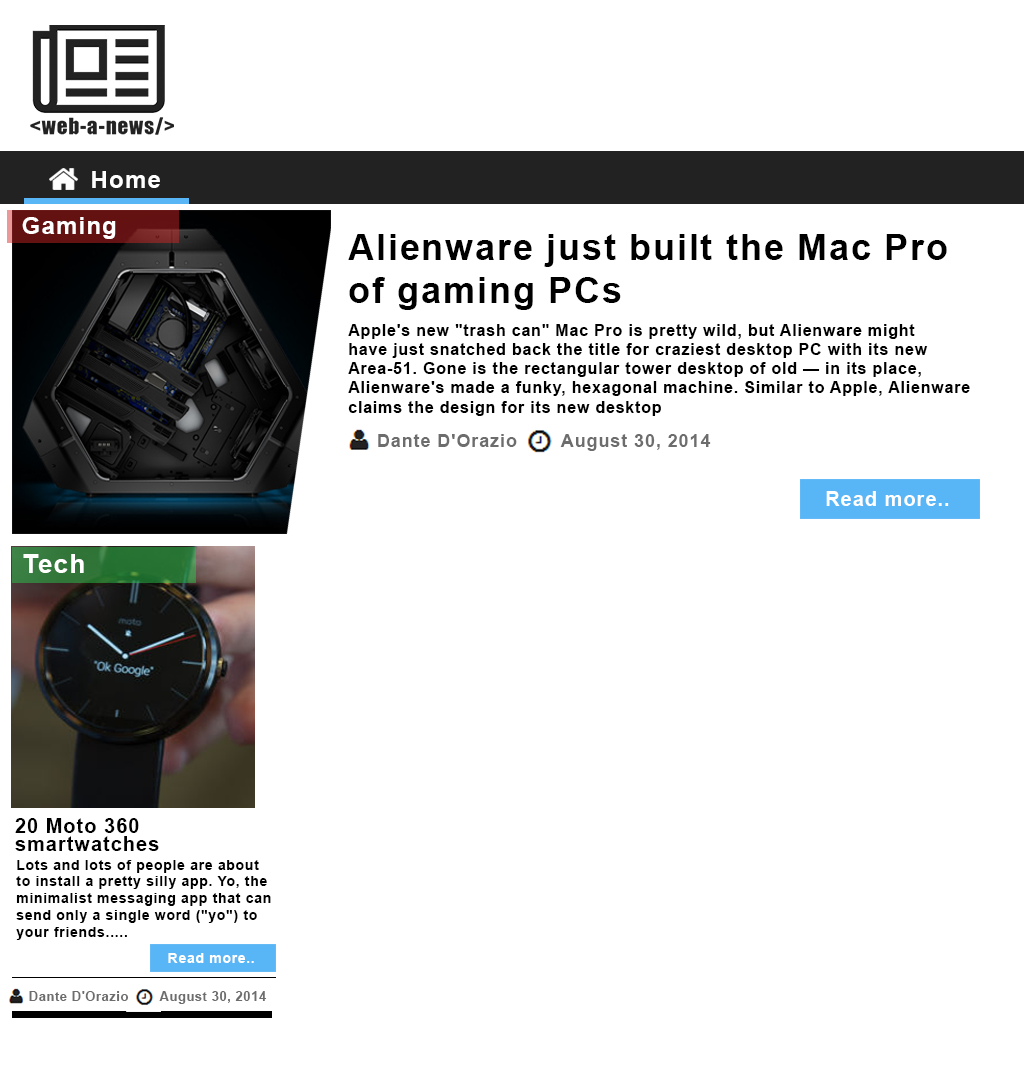
<style>
.page{position:relative;width:1024px;height:1080px;background:#ffffff}
.page>*{position:absolute;margin:0}
.t1{font:24px "Arial-BoldMT";letter-spacing:0.05em;color:#ffffff}
.t2{font:36px "Arial-BoldMT";letter-spacing:0.05em;color:#000000}
.t3{font:16px "Arial-BoldMT";letter-spacing:0.05em;color:#000000}
.t4{font:18px "Arial-BoldMT";letter-spacing:0.05em;color:#6d6d6d}
.t5{font:20px "Arial-BoldMT";letter-spacing:0.05em;color:#ffffff}
.t6{font:25.8px "Arial-BoldMT";letter-spacing:0.05em;color:#ffffff}
.t7{font:20px "Arial-BoldMT";letter-spacing:0.05em;color:#000000}
.t8{font:14px "Arial-BoldMT";letter-spacing:0.05em;color:#000000}
.t9{font:14px "Arial-BoldMT";letter-spacing:0.05em;color:#ffffff}
.t10{font:12.9px "Arial-BoldMT";letter-spacing:0.05em;color:#6d6d6d}
</style>
<div class="page">
<p class="t1" style="left:92px;top:171px;width:68px;height:17px">Home</p>
<p class="t1" style="left:22px;top:217px;width:94px;height:22px">Gaming</p>
<p class="t2" style="left:348px;top:234px;width:599px;height:76px">Alienware just built the Mac Pro <br>of gaming PCs</p>
<p class="t3" style="left:348px;top:324px;width:622px;height:92px">Apple's new "trash can" Mac Pro is pretty wild, but Alienware might <br>have just snatched back the title for craziest desktop PC with its new <br>Area-51. Gone is the rectangular tower desktop of old — in its place, <br>Alienware's made a funky, hexagonal machine. Similar to Apple, Alienware <br>claims the design for its new desktop</p>
<p class="t4" style="left:378px;top:434px;width:139px;height:13px">Dante D'Orazio</p>
<p class="t4" style="left:560px;top:434px;width:151px;height:17px">August 30, 2014</p>
<p class="t5" style="left:826px;top:491px;width:123px;height:15px">Read more..</p>
<p class="t6" style="left:23px;top:554px;width:61px;height:19px">Tech</p>
<p class="t7" style="left:15px;top:818px;width:144px;height:33px">20 Moto 360 <br>smartwatches</p>
<p class="t8" style="left:16px;top:860px;width:255px;height:80px"><span class="t7"><br></span>Lots and lots of people are about <br>to install a pretty silly app. Yo, the <br>minimalist messaging app that can <br>send only a single word ("yo") to <br>your friends.....</p>
<p class="t9" style="left:168px;top:953px;width:86px;height:10px">Read more..</p>
<p class="t10" style="left:29px;top:991px;width:100px;height:10px">Dante D'Orazio</p>
<p class="t10" style="left:159px;top:991px;width:108px;height:13px">August 30, 2014</p>
</div>
